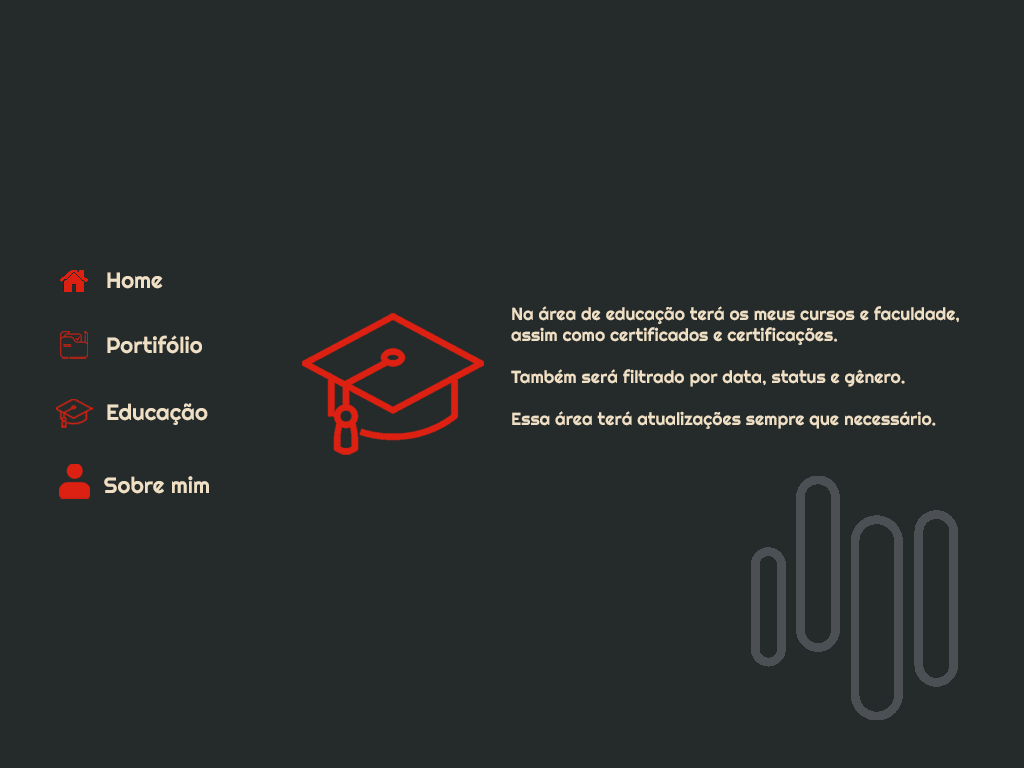
<style>
.page{position:relative;width:1024px;height:768px;background:#252b2b}
.page>*{position:absolute;margin:0}
.t1{font:22.3px "Righteous-Regular";color:#efdfc5}
.t2{font:17.5px "Righteous-Regular";color:#efdfc5}
</style>
<div class="page">
<p class="t1" style="left:107px;top:272px;width:56px;height:17px">Home</p>
<p class="t2" style="left:511px;top:306px;width:448px;height:123px">Na área de educação terá os meus cursos e faculdade,<br>assim como certificados e certificações.<br><br>Também será filtrado por data, status e gênero.<br><br>Essa área terá atualizações sempre que necessário.</p>
<p class="t1" style="left:107px;top:335px;width:95px;height:19px">Portifólio</p>
<p class="t1" style="left:107px;top:403px;width:101px;height:22px">Educação</p>
<p class="t1" style="left:104px;top:476px;width:105px;height:18px">Sobre mim</p>
</div>
